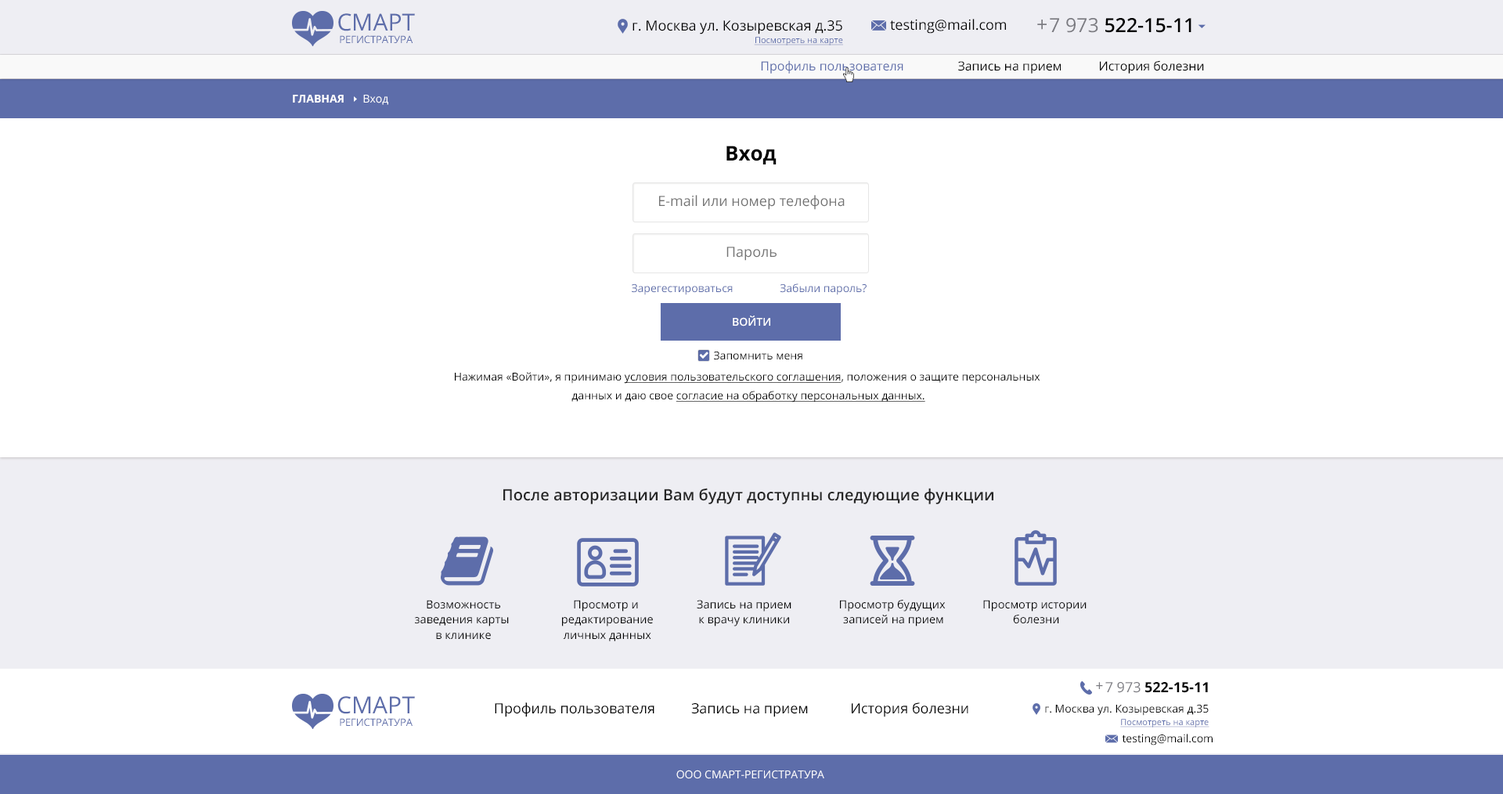
<style>
.page{position:relative;width:1503px;height:794px;background:#ffffff}
.page>*{position:absolute;margin:0}
.t1{font:10.2px/12.5px "OpenSans";letter-spacing:-0.005em;color:#5d6daa}
.t2{font:23.5px/12.5px "OpenSans";color:#5d6daa}
.t3{font:14.1px/11px "OpenSans";color:#000000}
.t4{font:8.6px/12.5px "OpenSans";color:#5d6daa;text-decoration:underline}
.t5{font:14.1px "OpenSans";color:#000000}
.t6{font:19.6px "OpenSans";color:#7b7b81}
.t7{font:19.6px "OpenSans-Semibold";color:#000000}
.t8{font:19.6px "OpenSans";color:#000000}
.t9{font:12.5px "OpenSans";color:#000000}
.t10{font:12.5px "OpenSans";color:#5d6daa}
.t11{font:11px "OpenSans-Bold";color:#ffffff}
.t12{font:11px "OpenSans";color:#ffffff}
.t13{font:20.3px "OpenSans-Bold";color:#000000}
.t14{font:14.1px "OpenSans";color:#727272}
.t15{font:11px "OpenSans";color:#5d6daa}
.t16{font:11px "OpenSans-Semibold";color:#ffffff;text-transform:uppercase}
.t17{font:11px "OpenSans";color:#000000}
.t18{font:11px/18.8px "OpenSans";color:#000000}
.t19{font:11px/18.8px "OpenSans";color:#000000;text-decoration:underline}
.t20{font:15.7px "OpenSans-Semibold";color:#262626}
.t21{font:11.4px/15.2px "OpenSans";color:#000000}
.t22{font:14.1px "OpenSans";color:#7b7b81}
.t23{font:14.1px "OpenSans-Bold";color:#000000}
.t24{font:11px/11px "OpenSans";color:#000000}
</style>
<div class="page">
<p class="t1" style="left:338px;top:13px;width:77px;height:30px;text-align:center"><span class="t2">CМАРТ<br></span>РЕГИСТРАТУРА</p>
<p class="t3" style="left:632px;top:20px;width:211px;height:25px;text-align:right">г. Москва ул. Козыревская д.35<br><span class="t4">Посмотреть на карте</span></p>
<p class="t5" style="left:890px;top:19px;width:116px;height:15px">testing@mail.com</p>
<p class="t6" style="left:1037px;top:20px;width:9px;height:10px">+</p>
<p class="t7" style="left:1049px;top:18px;width:142px;height:15px"><span class="t8">  </span><span class="t6">7 973 </span>522-15-11</p>
<p class="t9" style="left:761px;top:60px;width:443px;height:14px"><span class="t10">Профиль пользователя</span>  Запись на прием  История болезни</p>
<p class="t11" style="left:293px;top:95px;width:95px;height:10px">ГЛАВНАЯ      <span class="t12">Вход</span></p>
<p class="t13" style="left:726px;top:146px;width:50px;height:18px">Вход</p>
<p class="t14" style="left:659px;top:195px;width:185px;height:15px">E-mail или номер телефона</p>
<p class="t14" style="left:726px;top:247px;width:50px;height:14px">Пароль</p>
<p class="t15" style="left:632px;top:283px;width:101px;height:12px">Зарегестироваться</p>
<p class="t15" style="left:779px;top:283px;width:87px;height:12px">Забыли пароль?</p>
<p class="t16" style="left:733px;top:315px;width:37px;height:11px">ВОЙТИ</p>
<p class="t17" style="left:714px;top:351px;width:88px;height:9px">Запомнить меня</p>
<p class="t18" style="left:455px;top:372px;width:585px;height:30px;text-align:center">Нажимая «Войти», я принимаю <span class="t19">условия пользовательского соглашения</span>, положения о защите персональных <br>данных и даю свое <span class="t19">согласие на обработку персональных данных.</span></p>
<p class="t20" style="left:503px;top:488px;width:490px;height:16px">После авторизации Вам будут доступны следующие функции</p>
<p class="t21" style="left:415px;top:599px;width:94px;height:40px;text-align:center">Возможность<br>заведения карты <br>в клинике</p>
<p class="t21" style="left:562px;top:599px;width:91px;height:42px;text-align:center">Просмотр и <br>редактирование<br>личных данных</p>
<p class="t21" style="left:697px;top:599px;width:94px;height:27px;text-align:center">Запись на прием<br>к врачу клиники</p>
<p class="t21" style="left:840px;top:599px;width:105px;height:27px;text-align:center">Просмотр будущих <br>записей на прием</p>
<p class="t21" style="left:983px;top:599px;width:103px;height:25px;text-align:center">Просмотр истории <br>болезни</p>
<p class="t22" style="left:1096px;top:682px;width:7px;height:7px">+</p>
<p class="t23" style="left:1105px;top:682px;width:103px;height:11px"><span class="t5">  </span><span class="t22">7 973 </span>522-15-11</p>
<p class="t1" style="left:337px;top:696px;width:78px;height:29px;text-align:center"><span class="t2">CМАРТ<br></span>РЕГИСТРАТУРА</p>
<p class="t5" style="left:495px;top:702px;width:473px;height:15px">Профиль пользователя  Запись на прием      История болезни</p>
<p class="t24" style="left:1045px;top:704px;width:164px;height:23px;text-align:right">г. Москва ул. Козыревская д.35<br><span class="t4">Посмотреть на карте</span></p>
<p class="t17" style="left:1121px;top:733px;width:91px;height:12px">testing@mail.com</p>
<p class="t12" style="left:676px;top:769px;width:148px;height:10px">ООО СМАРТ-РЕГИСТРАТУРА</p>
</div>
